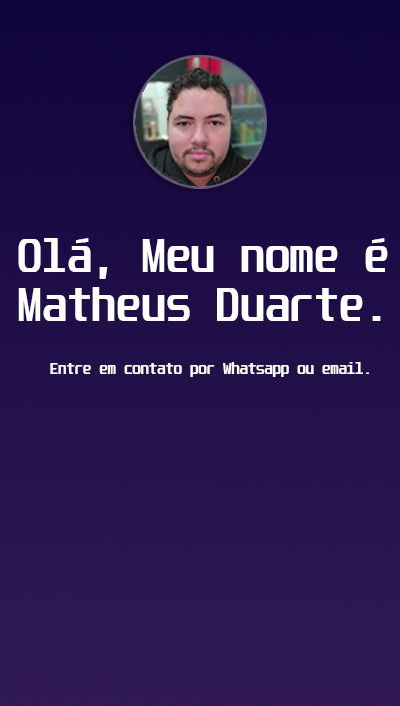
<style>
.page{position:relative;width:400px;height:706px}
.page>*{position:absolute;margin:0}
.t1{font:40.5px "Unispace-Bold";color:#ffffff}
.t2{font:13.5px "Unispace-Bold";color:#ffffff}
</style>
<div class="page">
<p class="t1" style="left:18px;top:238px;width:370px;height:83px">Olá, Meu nome é <br>Matheus Duarte.</p>
<p class="t2" style="left:50px;top:362px;width:319px;height:15px">Entre em contato por Whatsapp ou email.</p>
</div>
